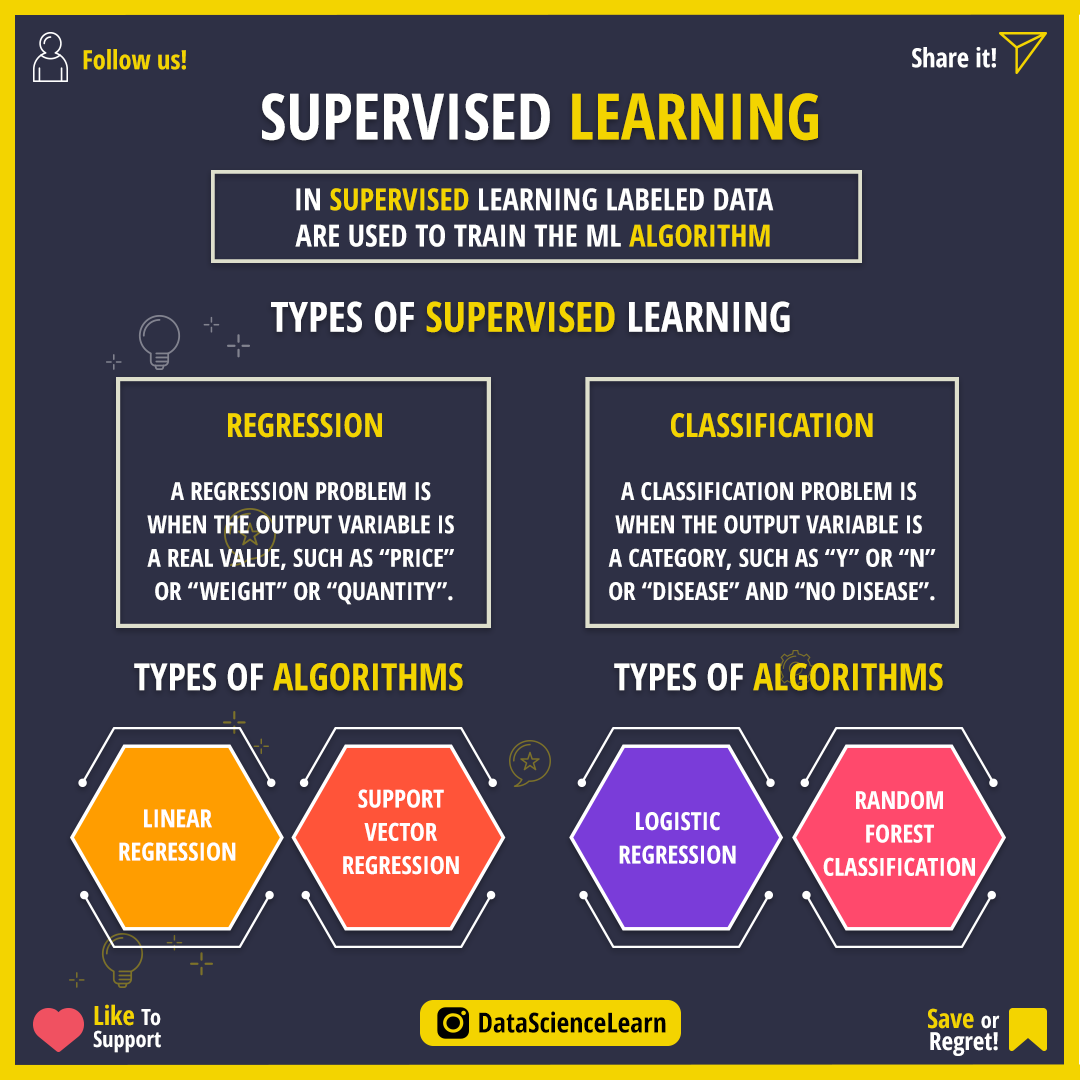
<style>
.page{position:relative;width:1080px;height:1080px;background:#2e3045}
.page>*{position:absolute;margin:0}
.t1{font:26.4px "OpenSans-CondensedBold";color:#f3d400}
.t2{font:26.4px "OpenSans-CondensedBold";color:#ffffff}
.t3{font:63.9px "OpenSans-CondensedBold";color:#fffffe}
.t4{font:63.9px "OpenSans-CondensedBold";color:#f3d400}
.t5{font:30.6px/36.1px "OpenSans-CondensedBold";color:#ffffff}
.t6{font:30.6px/36.1px "OpenSans-CondensedBold";color:#f3d400}
.t7{font:41.7px "OpenSans-CondensedBold";color:#f3d400}
.t8{font:41.7px "OpenSans-CondensedBold";color:#ffffff}
.t9{font:33.3px "OpenSans-CondensedBold";color:#f3d400}
.t10{font:25px/33.3px "OpenSans-CondensedBold";color:#ffffff}
.t11{font:37.5px "OpenSans-CondensedBold";color:#f3d400}
.t12{font:37.5px "OpenSans-CondensedBold";color:#fffffe}
.t13{font:22.2px/22.2px "OpenSans-CondensedBold";color:#ffffff}
.t14{font:26.4px/22.2px "OpenSans-CondensedBold";color:#f3d400}
.t15{font:27.8px "OpenSans-CondensedBold";color:#000000}
.t16{font:25px/22.2px "OpenSans-CondensedBold";color:#ffffff}
</style>
<div class="page">
<p class="t1" style="left:83px;top:49px;width:103px;height:21px">Follow us!</p>
<p class="t2" style="left:912px;top:47px;width:84px;height:21px">Share it!</p>
<p class="t3" style="left:262px;top:93px;width:556px;height:48px">SUPERVISED <span class="t4">LEARNING</span></p>
<p class="t5" style="left:295px;top:188px;width:479px;height:59px;text-align:center">IN <span class="t6">SUPERVISED </span>LEARNING LABELED DATA<br>ARE USED TO TRAIN THE ML <span class="t6">ALGORITHM</span></p>
<p class="t7" style="left:271px;top:301px;width:519px;height:32px"><span class="t8">TYPES OF </span>SUPERVISED <span class="t8">LEARNING</span></p>
<p class="t9" style="left:228px;top:413px;width:154px;height:25px">REGRESSION</p>
<p class="t9" style="left:671px;top:413px;width:202px;height:25px">CLASSIFICATION</p>
<p class="t10" style="left:147px;top:482px;width:307px;height:123px;text-align:center">A REGRESSION PROBLEM IS <br>WHEN THE OUTPUT VARIABLE IS <br>A REAL VALUE, SUCH AS “PRICE” <br>OR “WEIGHT” OR “QUANTITY”.</p>
<p class="t10" style="left:608px;top:482px;width:328px;height:119px;text-align:center">A CLASSIFICATION PROBLEM IS <br>WHEN THE OUTPUT VARIABLE IS <br>A CATEGORY, SUCH AS “Y” OR “N”<br>OR “DISEASE” AND “NO DISEASE”.</p>
<p class="t11" style="left:134px;top:663px;width:329px;height:28px"><span class="t12">TYPES OF </span>ALGORITHMS</p>
<p class="t11" style="left:614px;top:663px;width:329px;height:28px"><span class="t12">TYPES OF </span>ALGORITHMS</p>
<p class="t10" style="left:343px;top:789px;width:116px;height:86px;text-align:center">SUPPORT<br>VECTOR<br>REGRESSION</p>
<p class="t10" style="left:823px;top:791px;width:152px;height:85px;text-align:center">RANDOM<br>FOREST<br>CLASSIFICATION</p>
<p class="t10" style="left:119px;top:809px;width:117px;height:52px;text-align:center">LINEAR<br>REGRESSION</p>
<p class="t10" style="left:619px;top:812px;width:117px;height:52px;text-align:center">LOGISTIC<br>REGRESSION</p>
<p class="t13" style="left:93px;top:1004px;width:68px;height:49px"><span class="t14">Like </span>To<br>Support</p>
<p class="t15" style="left:479px;top:1011px;width:187px;height:22px">DataScienceLearn</p>
<p class="t16" style="left:928px;top:1008px;width:72px;height:48px;text-align:right"><span class="t14">Save </span><span class="t13">or<br></span>Regret!</p>
</div>
